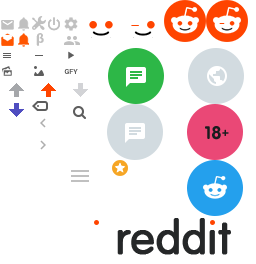
<style>
.page{position:relative;width:256px;height:264px;background:#ffffff}
.page>*{position:absolute;margin:0}
.t1{font:14px "MyriadPro-Bold";color:#c0c0c0}
.t2{font:7px "Roboto-Bold";color:#5d5d5d}
.t3{font:18px "VAG-Rounded-Bold";color:#1a1c1f}
.t4{font:12px "VAG-Rounded-Bold";color:#1a1c1f}
</style>
<div class="page">
<p class="t1" style="left:36px;top:33px;width:8px;height:13px">β</p>
<p class="t2" style="left:64px;top:69px;width:14px;height:5px">GFY</p>
<p class="t3" style="left:205px;top:126px;width:16px;height:14px">18</p>
<p class="t4" style="left:222px;top:129px;width:7px;height:7px">+</p>
</div>
